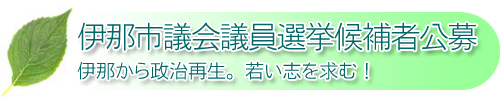
<style>
.page{position:relative;width:500px;height:100px;background:#ffffff}
.page>*{position:absolute;margin:0}
.t1{font:30px "NfMotoyaCedar-W1-90mskp-RKSJ-H";letter-spacing:-0.05em;color:#006666}
.t2{font:19px "NfMotoyaCedar-W1-90mskp-RKSJ-H";color:#006666}
</style>
<div class="page">
<p class="t1" style="left:78px;top:22px;width:399px;height:29px">伊那市議会議員選挙候補者公募</p>
<p class="t2" style="left:77px;top:62px;width:291px;height:18px">伊那から政治再生。若い志を求む！</p>
</div>
